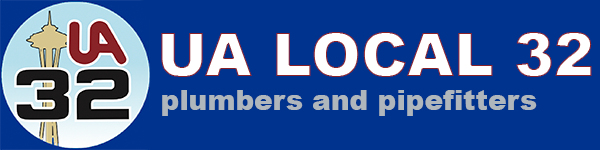
<style>
.page{position:relative;width:600px;height:150px;background:#00338d}
.page>*{position:absolute;margin:0}
.t1{font:60px "Arial-Black";color:#ffffff}
.t2{font:28px "Arial-Black";color:#b0b7bc}
</style>
<div class="page">
<p class="t1" style="left:161px;top:32px;width:431px;height:45px">UA LOCAL 32</p>
<p class="t2" style="left:162px;top:90px;width:375px;height:26px">plumbers and pipefitters</p>
</div>
